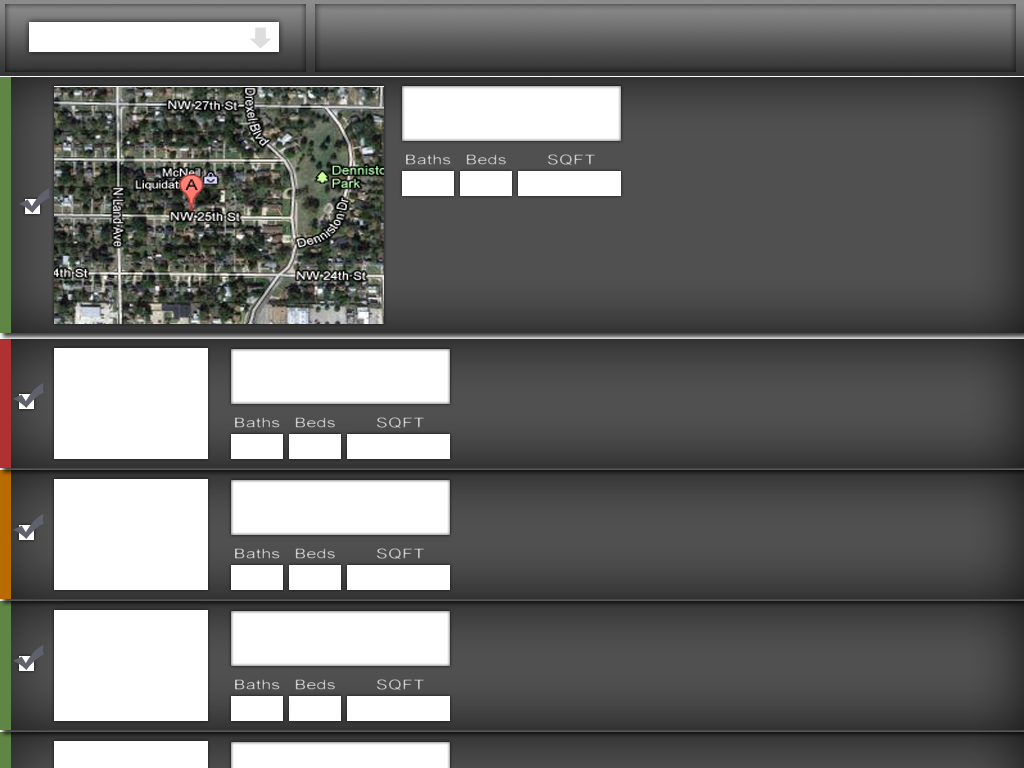
<style>
.page{position:relative;width:1024px;height:768px}
.page>*{position:absolute;margin:0}
.t1{font:14px "ArialMT";letter-spacing:0.01em;color:#b9b9b9;scale:1.28 1}
.t2{font:14px "ArialMT";letter-spacing:0.01em;color:#b8b8b8;scale:1.28 1}
.t3{font:14px "ArialMT";letter-spacing:0.01em;color:#c3c3c3;scale:1.28 1}
</style>
<div class="page">
<p class="t1" style="left:406px;top:154px;width:45px;height:11px">Baths</p>
<p class="t2" style="left:466px;top:154px;width:40px;height:11px">Beds</p>
<p class="t3" style="left:547px;top:154px;width:48px;height:12px">SQFT</p>
<p class="t1" style="left:235px;top:417px;width:45px;height:11px">Baths</p>
<p class="t2" style="left:295px;top:417px;width:40px;height:11px">Beds</p>
<p class="t3" style="left:376px;top:417px;width:48px;height:12px">SQFT</p>
<p class="t1" style="left:235px;top:548px;width:45px;height:11px">Baths</p>
<p class="t2" style="left:295px;top:548px;width:40px;height:11px">Beds</p>
<p class="t3" style="left:376px;top:548px;width:48px;height:12px">SQFT</p>
<p class="t1" style="left:235px;top:679px;width:45px;height:11px">Baths</p>
<p class="t2" style="left:295px;top:679px;width:40px;height:11px">Beds</p>
<p class="t3" style="left:376px;top:679px;width:48px;height:12px">SQFT</p>
</div>
